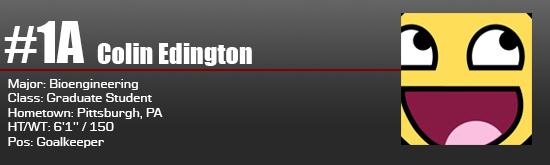
<style>
.page{position:relative;width:550px;height:165px}
.page>*{position:absolute;margin:0}
.t1{font:52.8px "Impact";color:#ffffff}
.t2{font:26.4px "Impact";color:#ffffff}
.t3{font:12px "Moire";color:#ffffff}
</style>
<div class="page">
<p class="t1" style="left:4px;top:21px;width:80px;height:42px">#1A</p>
<p class="t2" style="left:97px;top:43px;width:155px;height:23px">Colin Edington</p>
<p class="t3" style="left:8px;top:79px;width:155px;height:69px">Major: Bioengineering<br>Class: Graduate Student<br>Hometown: Pittsburgh, PA<br>HT/WT: 6'1'' / 150<br>Pos: Goalkeeper</p>
</div>
